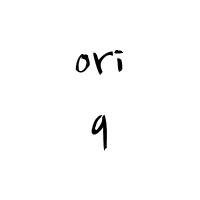
<style>
.page{position:relative;width:200px;height:200px;background:#ffffff}
.page>*{position:absolute;margin:0}
.t1{font:60px/72px "NanumBrush";color:#010000}
</style>
<div class="page">
<p class="t1" style="left:75px;top:50px;width:48px;height:101px;text-align:center">ori<br>9</p>
</div>
